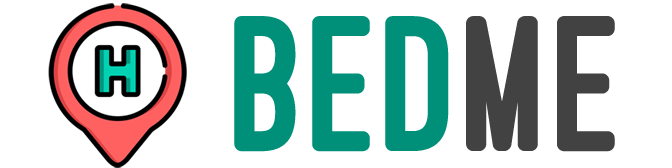
<style>
.page{position:relative;width:672px;height:168px;background:#ffffff}
.page>*{position:absolute;margin:0}
.t1{font:200px "OstrichSans-Heavy";letter-spacing:0.01em;color:#00907a}
.t2{font:200px "OstrichSans-Heavy";letter-spacing:0.01em;color:#424242}
</style>
<div class="page">
<p class="t1" style="left:234px;top:16px;width:381px;height:136px">BED<span class="t2">mE</span></p>
</div>
